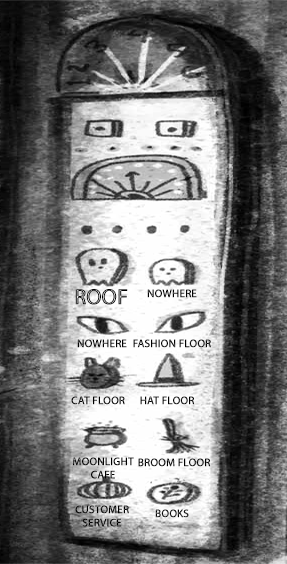
<style>
.page{position:relative;width:287px;height:564px}
.page>*{position:absolute;margin:0}
.t1{font:22px "MyriadPro-Regular";letter-spacing:-0.02em;font-weight:bold}
.t2{font:11px "MyriadPro-Regular";color:#000000;font-weight:bold}
.t3{font:11px "MyriadPro-Regular";font-weight:bold}
.t4{font:11px "MyriadPro-Regular";color:#101010;font-weight:bold}
</style>
<div class="page">
<p class="t1" style="left:75px;top:289px;width:53px;height:16px">ROOF</p>
<p class="t2" style="left:147px;top:289px;width:50px;height:9px">NOWHERE</p>
<p class="t2" style="left:77px;top:339px;width:50px;height:9px">NOWHERE</p>
<p class="t3" style="left:133px;top:339px;width:78px;height:9px">FASHION FLOOR</p>
<p class="t4" style="left:71px;top:396px;width:54px;height:9px">CAT FLOOR</p>
<p class="t3" style="left:140px;top:396px;width:55px;height:9px">HAT FLOOR</p>
<p class="t2" style="left:73px;top:457px;width:61px;height:22px;text-align:center">MOONLIGHT<br>CAFE</p>
<p class="t3" style="left:138px;top:458px;width:73px;height:9px">BROOM FLOOR</p>
<p class="t3" style="left:75px;top:505px;width:54px;height:22px;text-align:center">CUSTOMER<br>SERVICE</p>
<p class="t3" style="left:155px;top:509px;width:34px;height:9px">BOOKS</p>
</div>
